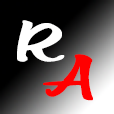
<style>
.page{position:relative;width:114px;height:114px;background:#000000}
.page>*{position:absolute;margin:0}
.t1{font:60px "VNI-Thufap3";color:#fefefe;font-weight:bold}
.t2{font:60px "VNI-Thufap3";color:#ff0000;font-weight:bold}
</style>
<div class="page">
<p class="t1" style="left:17px;top:20px;width:48px;height:42px">R</p>
<p class="t2" style="left:43px;top:54px;width:50px;height:47px">A</p>
</div>
